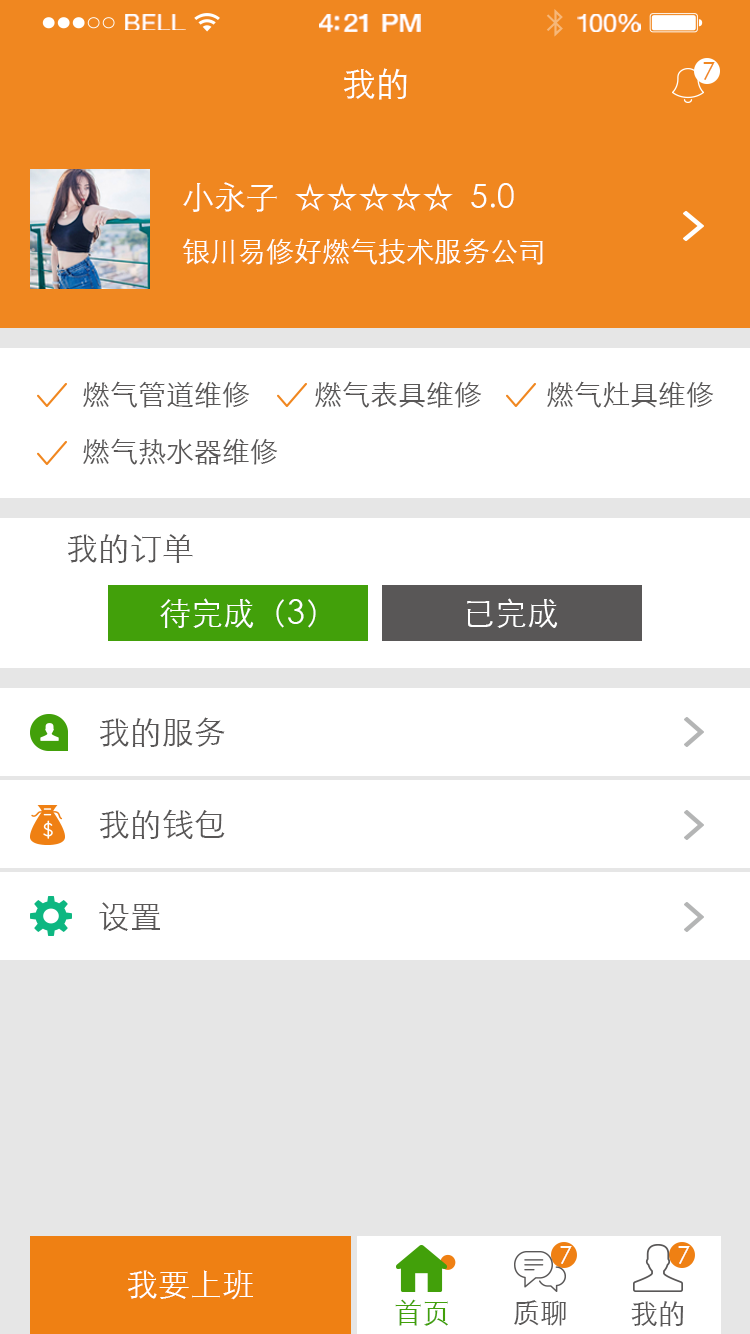
<style>
.page{position:relative;width:750px;height:1334px;background:#ffffff}
.page>*{position:absolute;margin:0}
.t1{font:23.3px "HelveticaNeue";letter-spacing:0.02em;color:#ffffff;scale:1.06 1}
.t2{font:25.3px "HelveticaNeue-Medium";letter-spacing:-0.02em;color:#ffffff;scale:1.06 1}
.t3{font:24.3px "HelveticaNeue";letter-spacing:-0.02em;color:#ffffff;scale:1.06 1}
.t4{font:24px "STXihei";color:#f08720}
.t5{font:34px "STXihei";color:#ffffff}
.t6{font:32px/56px "STXihei";color:#ffffff}
.t7{font:28px/56px "STXihei";color:#ffffff}
.t8{font:28px "STXihei";color:#595757}
.t9{font:32px "STXihei";color:#595757}
.t10{font:32px "STXihei";color:#ffffff}
.t11{font:24px "STXihei";color:#ffffff}
.t12{font:28px "STXihei";color:#42a00a}
</style>
<div class="page">
<p class="t1" style="left:125px;top:14px;width:61px;height:16px">BELL</p>
<p class="t2" style="left:319px;top:14px;width:102px;height:18px">4:21 PM</p>
<p class="t3" style="left:577px;top:14px;width:64px;height:18px">100%</p>
<p class="t4" style="left:703px;top:62px;width:12px;height:18px">7</p>
<p class="t5" style="left:344px;top:68px;width:63px;height:32px">我的</p>
<p class="t6" style="left:182px;top:182px;width:361px;height:83px">小永子  ☆☆☆☆☆  5.0<br><span class="t7">银川易修好燃气技术服务公司</span></p>
<p class="t8" style="left:83px;top:381px;width:167px;height:27px">燃气管道维修</p>
<p class="t8" style="left:315px;top:381px;width:167px;height:27px">燃气表具维修</p>
<p class="t8" style="left:547px;top:381px;width:167px;height:27px">燃气灶具维修</p>
<p class="t8" style="left:83px;top:438px;width:195px;height:27px">燃气热水器维修</p>
<p class="t9" style="left:68px;top:534px;width:125px;height:29px">我的订单</p>
<p class="t10" style="left:160px;top:598px;width:156px;height:30px">待完成（3）</p>
<p class="t10" style="left:467px;top:598px;width:91px;height:30px">已完成</p>
<p class="t9" style="left:100px;top:717px;width:125px;height:30px">我的服务</p>
<p class="t9" style="left:100px;top:809px;width:125px;height:30px">我的钱包</p>
<p class="t9" style="left:99px;top:902px;width:61px;height:29px">设置</p>
<p class="t11" style="left:560px;top:1246px;width:12px;height:18px">7</p>
<p class="t11" style="left:678px;top:1246px;width:12px;height:18px">7</p>
<p class="t10" style="left:128px;top:1270px;width:125px;height:30px">我要上班</p>
<p class="t12" style="left:395px;top:1299px;width:53px;height:27px">首页</p>
<p class="t8" style="left:514px;top:1300px;width:52px;height:26px">质聊</p>
<p class="t8" style="left:631px;top:1301px;width:53px;height:26px">我的</p>
</div>
